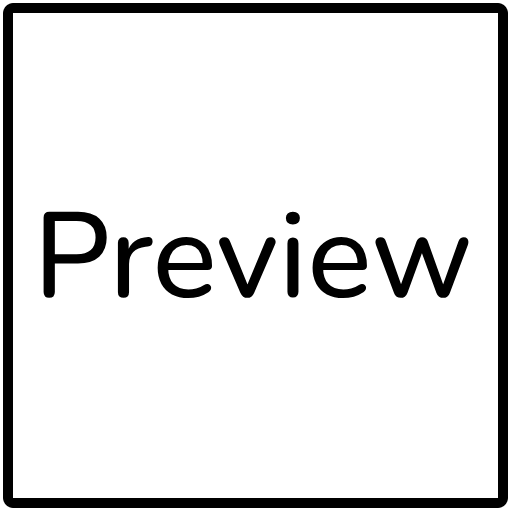
<style>
.page{position:relative;width:512px;height:512px;background:#ffffff}
.page>*{position:absolute;margin:0}
.t1{font:120.8px "Nunito-Medium";color:#000000}
</style>
<div class="page">
<p class="t1" style="left:43px;top:211px;width:426px;height:87px">Preview</p>
</div>
